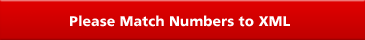
<style>
.page{position:relative;width:365px;height:40px}
.page>*{position:absolute;margin:0}
.t1{font:14px "FrutigerVCCP75Blk";color:#ffffff}
</style>
<div class="page">
<p class="t1" style="left:70px;top:15px;width:220px;height:12px">Please Match Numbers to XML</p>
</div>
